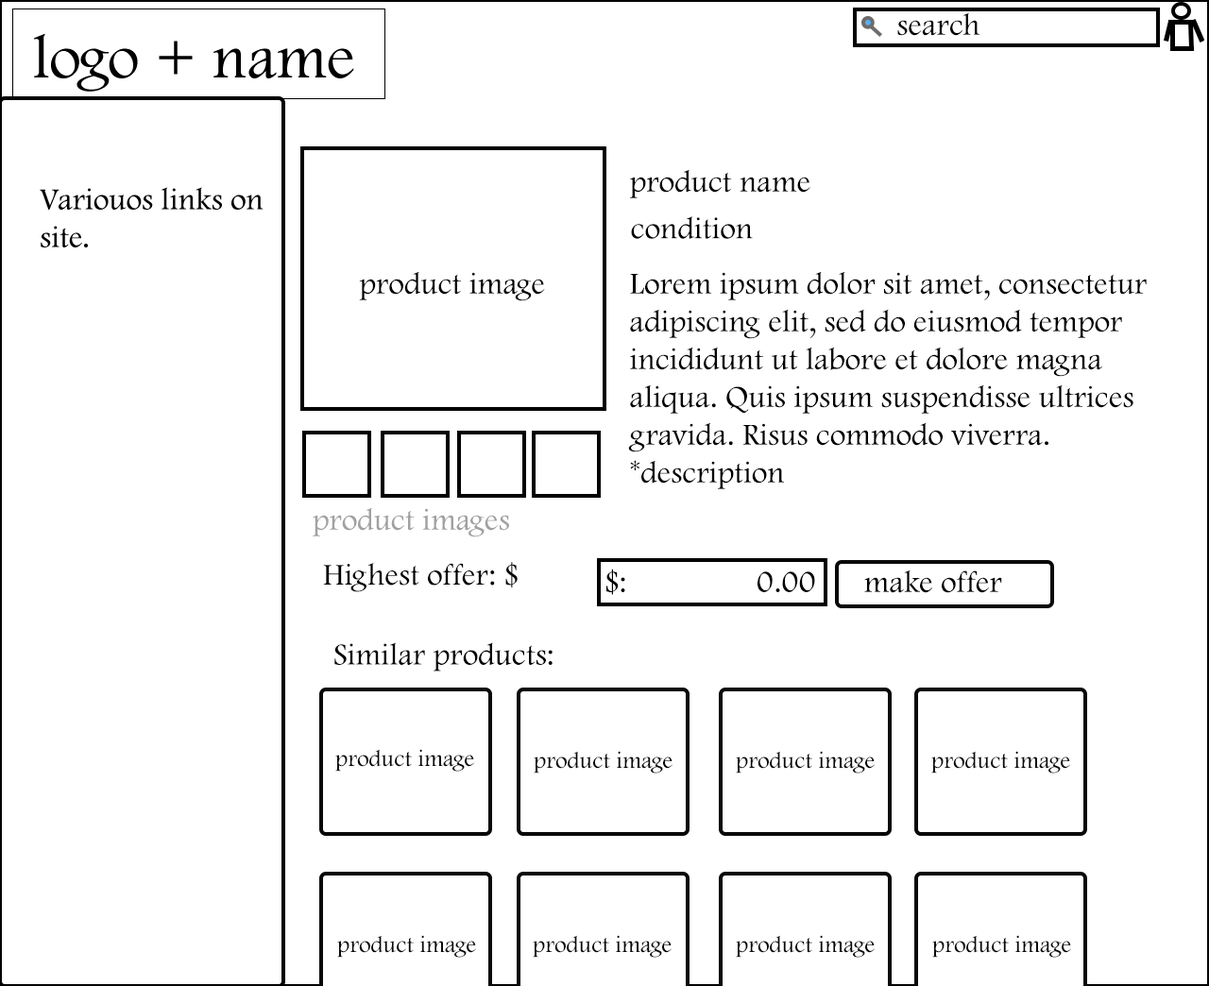
<style>
.page{position:relative;width:1209px;height:986px;background:#ffffff}
.page>*{position:absolute;margin:0}
.t1{font:31.5px "FootlightMTLight";color:#000000}
.t2{font:31.5px "FootlightMTLight";color:#a2a0a0}
.t3{font:23.6px "FootlightMTLight";color:#080808}
</style>
<div class="page">
<p class="t1" style="left:897px;top:12px;width:83px;height:24px">search</p>
<p class="t1" style="left:630px;top:169px;width:180px;height:29px">product name</p>
<p class="t1" style="left:631px;top:216px;width:122px;height:23px">condition</p>
<p class="t1" style="left:359px;top:271px;width:186px;height:30px">product image</p>
<p class="t1" style="left:628px;top:271px;width:519px;height:218px">Lorem ipsum dolor sit amet, consectetur adipiscing elit, sed do eiusmod tempor incididunt ut labore et dolore magna aliqua. Quis ipsum suspendisse ultrices gravida. Risus commodo viverra. *description</p>
<p class="t2" style="left:313px;top:507px;width:196px;height:30px">product images</p>
<p class="t1" style="left:323px;top:562px;width:195px;height:30px">Highest offer: $</p>
<p class="t1" style="left:606px;top:569px;width:209px;height:26px">$:      0.00</p>
<p class="t1" style="left:864px;top:570px;width:138px;height:23px">make offer</p>
<p class="t1" style="left:334px;top:642px;width:219px;height:30px">Similar products:</p>
<p class="t3" style="left:335px;top:749px;width:139px;height:23px">product image</p>
<p class="t3" style="left:534px;top:751px;width:139px;height:23px">product image</p>
<p class="t3" style="left:736px;top:751px;width:139px;height:23px">product image</p>
<p class="t3" style="left:931px;top:751px;width:139px;height:23px">product image</p>
<p class="t3" style="left:337px;top:935px;width:139px;height:23px">product image</p>
<p class="t3" style="left:533px;top:935px;width:139px;height:23px">product image</p>
<p class="t3" style="left:736px;top:935px;width:139px;height:23px">product image</p>
<p class="t3" style="left:932px;top:935px;width:139px;height:23px">product image</p>
</div>
